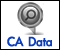
<style>
.page{position:relative;width:60px;height:50px;background:#ffffff}
.page>*{position:absolute;margin:0}
.t1{font:17px "PSLxKittithada-Bold";color:#0b3ebe;font-weight:bold}
</style>
<div class="page">
<p class="t1" style="left:7px;top:36px;width:45px;height:11px">CA Data</p>
</div>
